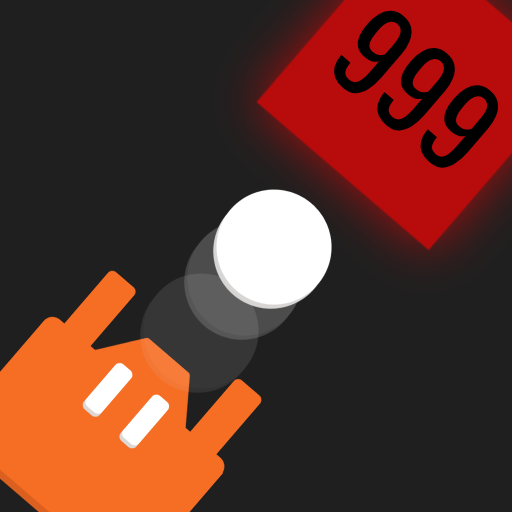
<style>
.page{position:relative;width:512px;height:512px;background:#1f1f1f}
.page>*{position:absolute;margin:0}
.t1{font:113.7px "Oswald-Regular";color:#000000}
</style>
<div class="page">
<p class="t1" style="left:334px;top:10px;width:165px;height:158px;rotate:41deg">999</p>
</div>
